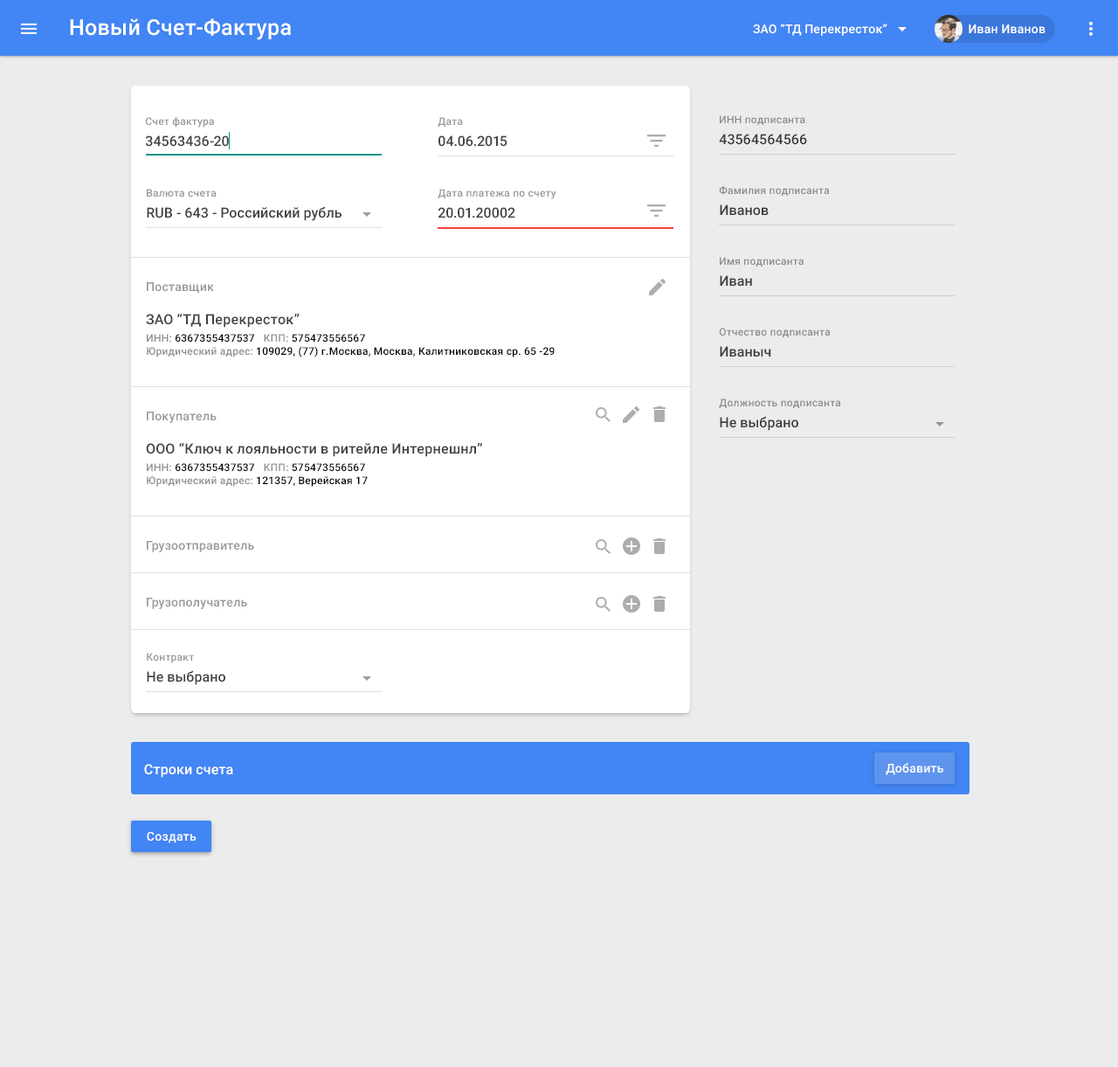
<style>
.page{position:relative;width:1118px;height:1067px;background:#ececec}
.page>*{position:absolute;margin:0}
.t1{font:21.8px "Roboto-Medium";letter-spacing:0.01em;color:#ffffff}
.t2{font:12.2px "Roboto-Medium";letter-spacing:0.01em;color:#ffffff}
.t3{font:10.5px "Roboto-Medium";letter-spacing:0.02em;color:#999999}
.t4{font:10.5px "Roboto-Medium";letter-spacing:0.02em;color:#8d8d8d}
.t5{font:14px "Roboto-Medium";color:#424242}
.t6{font:14px "Roboto-Medium";color:#3d3d3d}
.t7{font:12.2px "Roboto-Medium";letter-spacing:0.01em;color:#999999}
.t8{font:14px "Roboto-Medium";letter-spacing:0.01em;color:#424242}
.t9{font:10.5px/12.6px "Roboto-Medium";letter-spacing:0.02em;color:#000000}
.t10{font:10.5px/12.6px "Roboto-Medium";letter-spacing:0.02em;color:#919191}
.t11{font:14px "Roboto-Medium";color:#ffffff}
</style>
<div class="page">
<p class="t1" style="left:70px;top:18px;width:221px;height:22px">Новый Счет-Фактура</p>
<p class="t2" style="left:753px;top:24px;width:134px;height:12px">ЗАО “ТД Перекресток”</p>
<p class="t2" style="left:969px;top:24px;width:77px;height:10px">Иван Иванов</p>
<p class="t3" style="left:145px;top:117px;width:69px;height:11px">Счет фактура</p>
<p class="t3" style="left:438px;top:117px;width:25px;height:10px">Дата</p>
<p class="t4" style="left:720px;top:115px;width:85px;height:10px">ИНН подписанта</p>
<p class="t5" style="left:145px;top:135px;width:84px;height:12px">34563436-20</p>
<p class="t5" style="left:438px;top:135px;width:69px;height:12px">04.06.2015</p>
<p class="t6" style="left:719px;top:134px;width:88px;height:11px">43564564566</p>
<p class="t3" style="left:147px;top:189px;width:70px;height:8px">Валюта счета</p>
<p class="t3" style="left:438px;top:189px;width:118px;height:10px">Дата платежа по счету</p>
<p class="t4" style="left:719px;top:186px;width:111px;height:10px">Фамилия подписанта</p>
<p class="t5" style="left:147px;top:206px;width:195px;height:15px">RUB - 643 - Российский рубль</p>
<p class="t5" style="left:438px;top:207px;width:77px;height:11px">20.01.20002</p>
<p class="t6" style="left:720px;top:204px;width:49px;height:12px">Иванов</p>
<p class="t4" style="left:720px;top:257px;width:84px;height:9px">Имя подписанта</p>
<p class="t6" style="left:720px;top:275px;width:32px;height:12px">Иван</p>
<p class="t7" style="left:147px;top:282px;width:67px;height:11px">Поставщик</p>
<p class="t8" style="left:146px;top:313px;width:154px;height:15px">ЗАО “ТД Перекресток”</p>
<p class="t4" style="left:719px;top:328px;width:112px;height:9px">Отчество подписанта</p>
<p class="t9" style="left:147px;top:334px;width:408px;height:23px"><span class="t10">ИНН:</span> 6367355437537   <span class="t10">КПП:</span> 575473556567<br><span class="t10">Юридический адрес: </span>109029, (77) г.Москва, Москва, Калитниковская ср. 65 -29</p>
<p class="t6" style="left:720px;top:346px;width:51px;height:11px">Иваныч</p>
<p class="t4" style="left:719px;top:398px;width:122px;height:10px">Должность подписанта</p>
<p class="t7" style="left:147px;top:411px;width:70px;height:12px">Покупатель</p>
<p class="t6" style="left:720px;top:416px;width:78px;height:15px">Не выбрано</p>
<p class="t8" style="left:146px;top:442px;width:336px;height:15px">ООО “Ключ к лояльности в ритейле Интернешнл”</p>
<p class="t9" style="left:147px;top:463px;width:221px;height:24px"><span class="t10">ИНН:</span> 6367355437537   <span class="t10">КПП:</span> 575473556567<br><span class="t10">Юридический адрес: </span>121357, Верейская 17</p>
<p class="t7" style="left:147px;top:541px;width:107px;height:11px">Грузоотправитель</p>
<p class="t7" style="left:147px;top:597px;width:100px;height:12px">Грузополучатель</p>
<p class="t3" style="left:147px;top:652px;width:47px;height:11px">Контракт</p>
<p class="t5" style="left:147px;top:670px;width:78px;height:15px">Не выбрано</p>
<p class="t11" style="left:144px;top:763px;width:89px;height:14px">Строки счета</p>
<p class="t2" style="left:886px;top:763px;width:57px;height:12px">Добавить</p>
<p class="t2" style="left:147px;top:832px;width:50px;height:11px">Создать</p>
</div>
